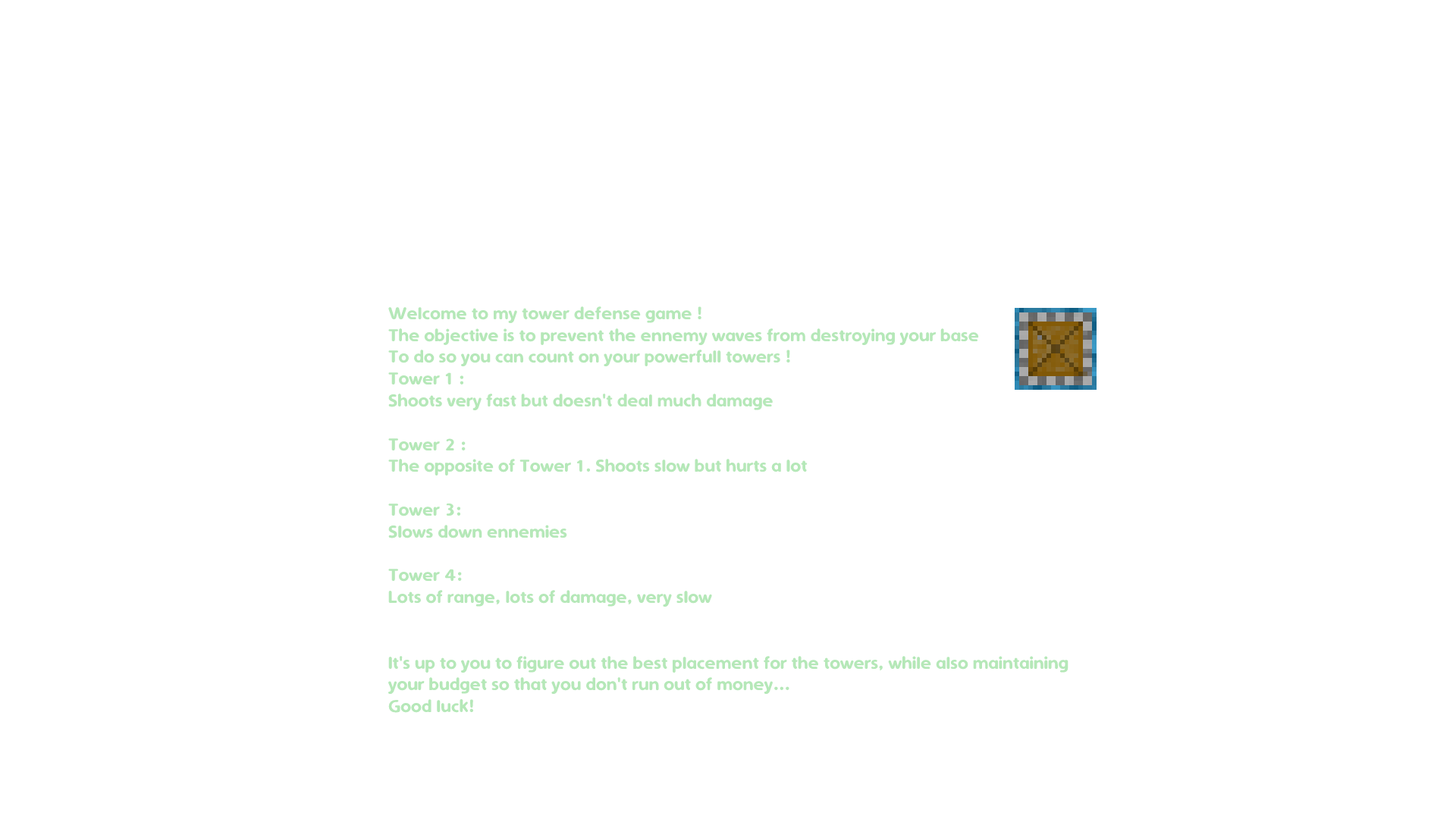
<style>
.page{position:relative;width:1456px;height:819px;background:#ffffff}
.page>*{position:absolute;margin:0}
.t1{font:18.2px "SimplyRounded";color:#b5e8b8}
</style>
<div class="page">
<p class="t1" style="left:388px;top:306px;width:680px;height:407px">Welcome to my tower defense game !<br>The objective is to prevent the ennemy waves from destroying your base<br>To do so you can count on your powerfull towers !<br>Tower 1 :<br>Shoots very fast but doesn't deal much damage<br><br>Tower 2 :<br>The opposite of Tower 1. Shoots slow but hurts a lot<br><br>Tower 3:<br>Slows down ennemies<br><br>Tower 4:<br>Lots of range, lots of damage, very slow<br><br><br>It's up to you to figure out the best placement for the towers, while also maintaining your budget so that you don't run out of money...<br>Good luck!</p>
</div>
